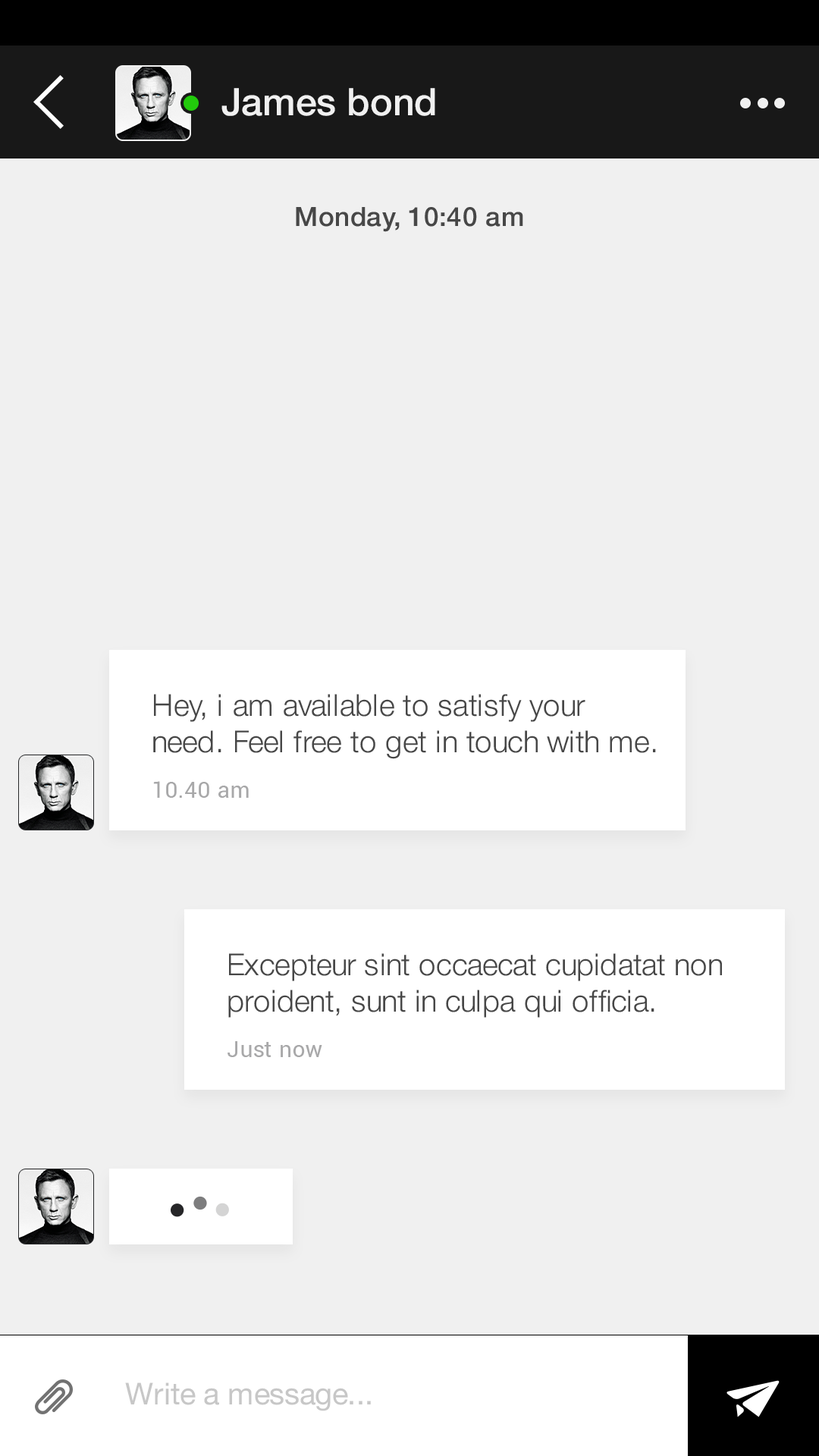
<style>
.page{position:relative;width:819px;height:1456px;background:#f0f0f0}
.page>*{position:absolute;margin:0}
.t1{font:37.9px "HelveticaNeue-Medium";color:#f0f0f0}
.t2{font:26.5px "HelveticaNeue-Medium";letter-spacing:0.02em;color:#474747}
.t3{font:30.3px "HelveticaNeue-Light";color:#474747}
.t4{font:22.7px "Roboto-Regular";color:#a8a8a9}
.t5{font:30.3px "HelveticaNeue";color:#c7c7c7}
</style>
<div class="page">
<p class="t1" style="left:221px;top:88px;width:214px;height:28px">James bond</p>
<p class="t2" style="left:296px;top:207px;width:227px;height:25px">Monday, 10:40 am</p>
<p class="t3" style="left:153px;top:694px;width:503px;height:65px">Hey, i am available to satisfy your<br>need. Feel free to get in touch with me.</p>
<p class="t4" style="left:153px;top:781px;width:96px;height:17px">10.40 am</p>
<p class="t3" style="left:228px;top:953px;width:494px;height:65px">Excepteur sint occaecat cupidatat non<br>proident, sunt in culpa qui officia.</p>
<p class="t4" style="left:227px;top:1041px;width:95px;height:16px">Just now</p>
<p class="t5" style="left:125px;top:1382px;width:246px;height:29px">Write a message...</p>
</div>
